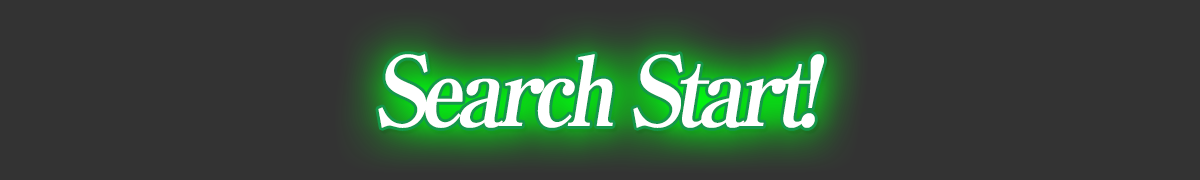
<style>
.page{position:relative;width:1200px;height:180px;background:#333333}
.page>*{position:absolute;margin:0}
.t1{font:96px "RyuminPro-ExBold";letter-spacing:-0.08em;color:#ffffff;font-style:italic;scale:0.9 1}
</style>
<div class="page">
<p class="t1" style="left:378px;top:54px;width:446px;height:74px">Search Start!</p>
</div>
